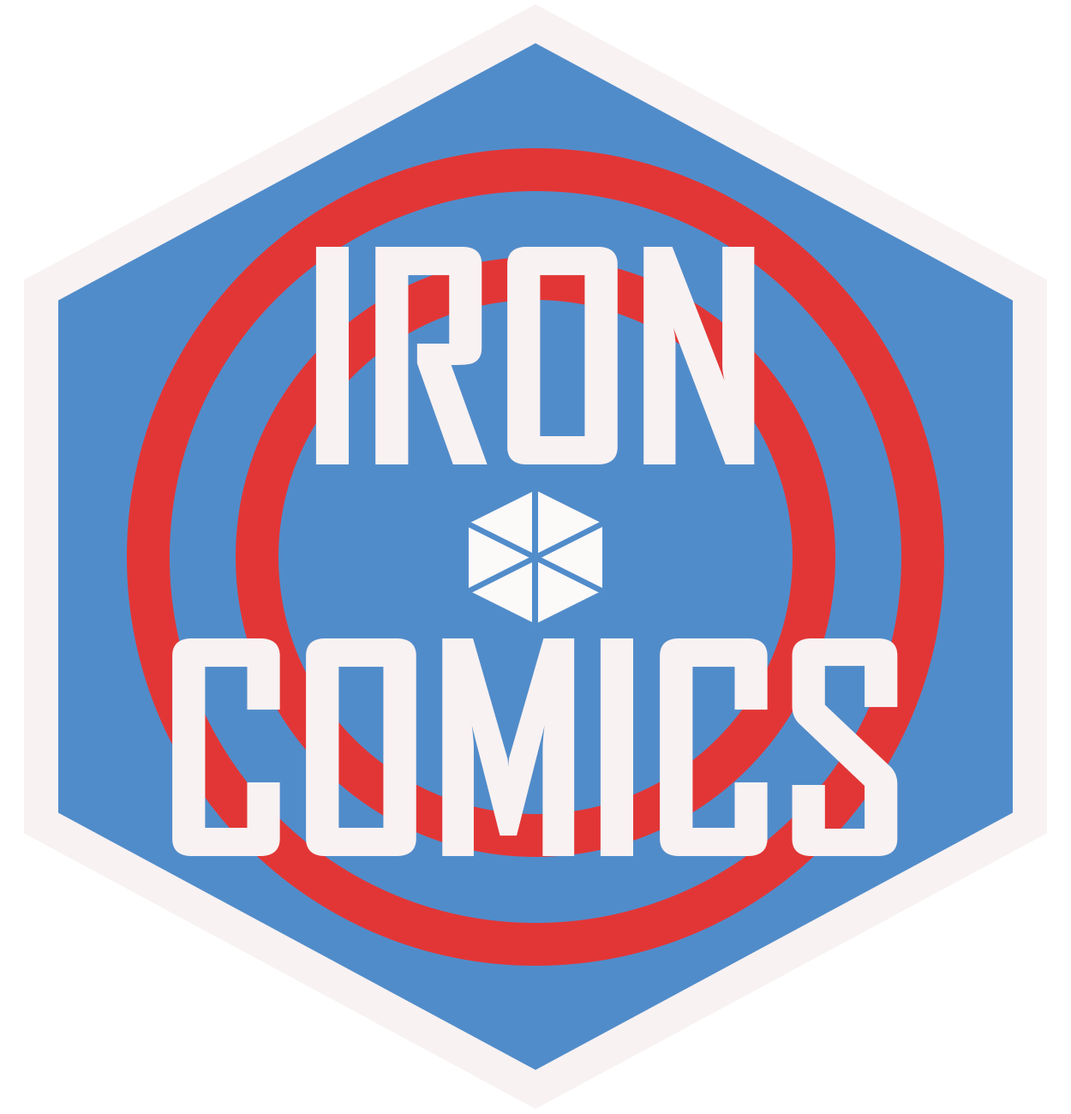
<style>
.page{position:relative;width:1071px;height:1114px;background:#518cca}
.page>*{position:absolute;margin:0}
.t1{font:285.5px "AgencyFB-Bold";color:#f8f2f2}
</style>
<div class="page">
<p class="t1" style="left:172px;top:247px;width:726px;height:609px;text-align:center">IRON<br><br><br><br>COMICS</p>
</div>
